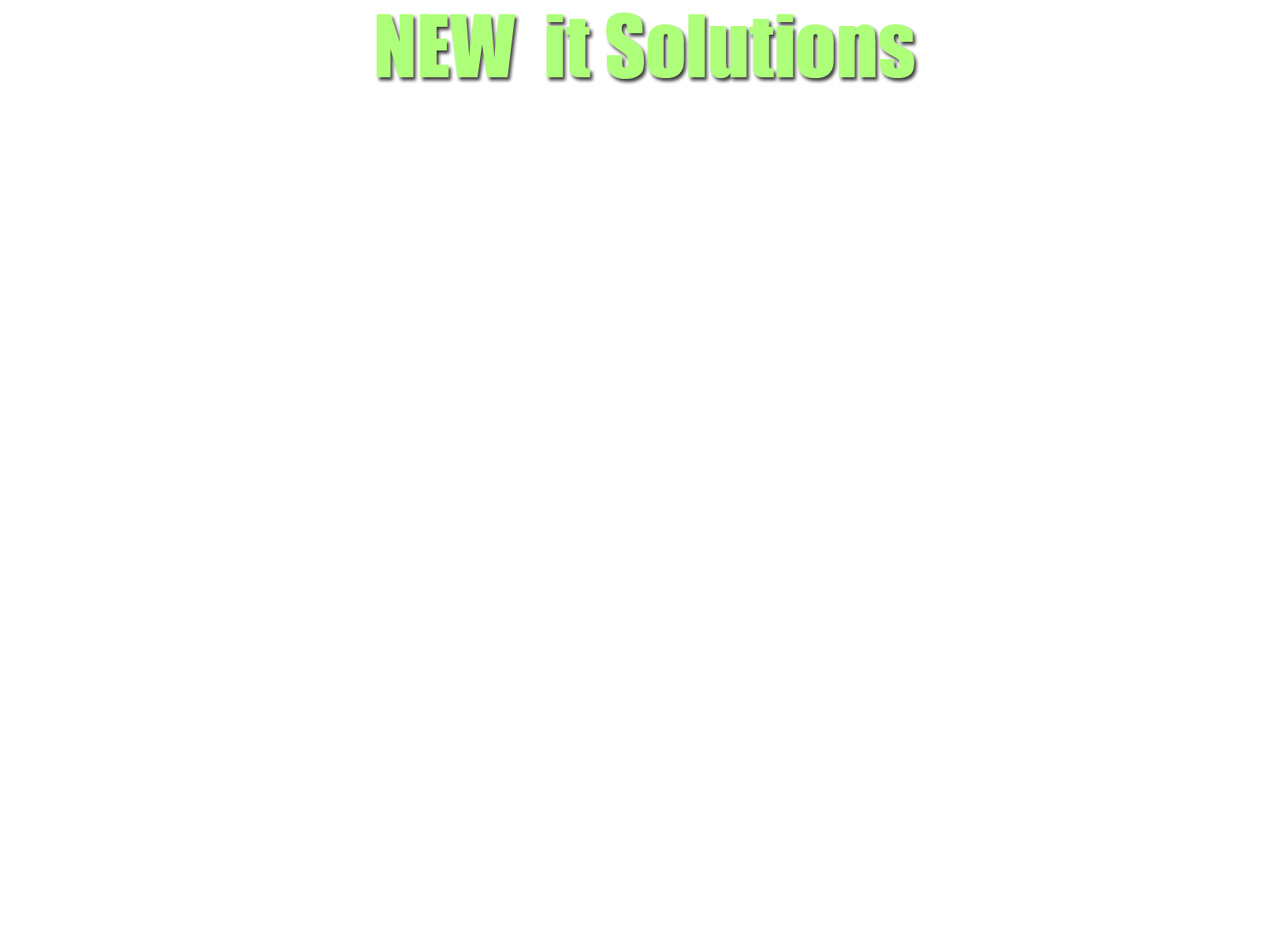
<style>
.page{position:relative;width:1261px;height:946px;background:#ffffff}
.page>*{position:absolute;margin:0}
.t1{font:79.6px "Impact";color:#aeff7a}
</style>
<div class="page">
<p class="t1" style="left:377px;top:13px;width:537px;height:66px">NEW  it Solutions</p>
</div>
